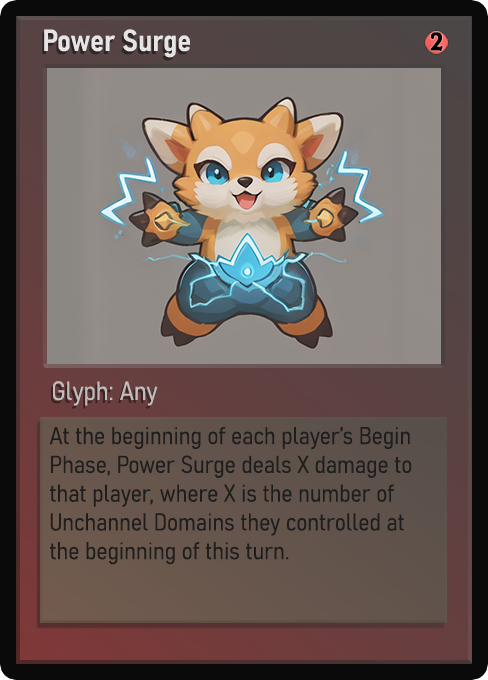
<style>
.page{position:relative;width:488px;height:680px}
.page>*{position:absolute;margin:0}
.t1{font:30px "Bahnschrift-SemiBoldSemiCondensed";color:#f2f2f2;font-weight:bold}
.t2{font:25px "WTRRoycroft";color:#000000;font-weight:bold;scale:1.09 1}
.t3{font:26px "Bahnschrift-LightSemiCondensed";color:#c8c8c8;font-weight:bold}
.t4{font:24px "Bahnschrift-LightSemiCondensed";color:#1e1e1e;font-weight:bold}
</style>
<div class="page">
<p class="t1" style="left:44px;top:29px;width:146px;height:29px;opacity:0.9">Power Surge</p>
<p class="t2" style="left:430px;top:32px;width:13px;height:19px">2</p>
<p class="t3" style="left:53px;top:381px;width:105px;height:25px;opacity:0.9">Glyph: Any</p>
<p class="t4" style="left:49px;top:427px;width:363px;height:138px">At the beginning of each player’s Begin Phase, Power Surge deals X damage to that player, where X is the number of Unchannel Domains they controlled at the beginning of this turn.</p>
</div>
